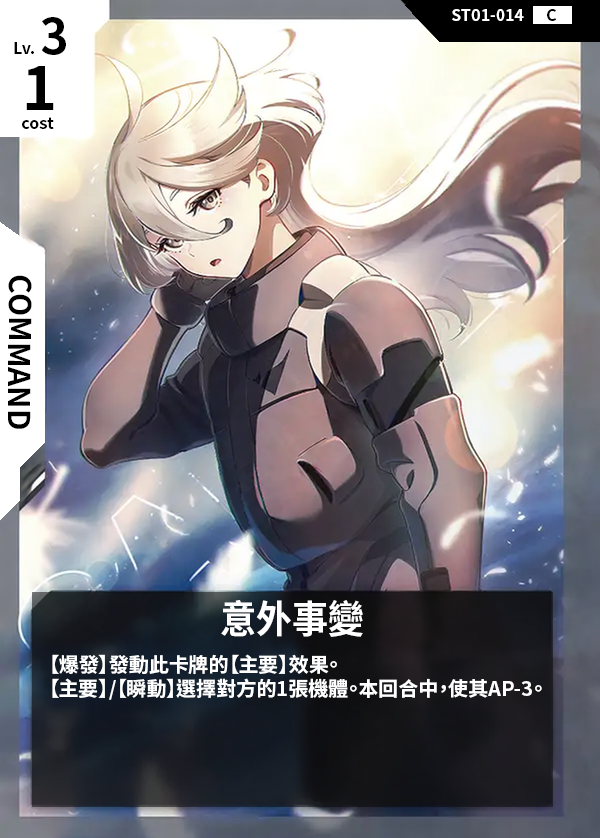
<style>
.page{position:relative;width:600px;height:838px}
.page>*{position:absolute;margin:0}
.t1{font:48px "NotoSansCJKtc-Bold";color:#000000}
.t2{font:16px "NotoSansCJKtc-Bold";color:#ffffff}
.t3{font:16px "NotoSansCJKtc-Bold";color:#000000}
.t4{font:60px "NotoSansCJKtc-Bold";color:#000000}
.t5{font:30px "NotoSansCJKtc-Bold";color:#000000}
.t6{font:38.4px "NotoSansCJKtc-Bold";color:#ffffff;scale:0.94 1}
.t7{font:20px "NotoSansCJKtc-Bold";color:#ffffff}
</style>
<div class="page">
<p class="t1" style="left:41px;top:17px;width:25px;height:38px">3</p>
<p class="t2" style="left:452px;top:9px;width:72px;height:12px">ST01-014</p>
<p class="t3" style="left:547px;top:9px;width:10px;height:12px">C</p>
<p class="t3" style="left:14px;top:42px;width:20px;height:12px">Lv.</p>
<p class="t4" style="left:26px;top:66px;width:28px;height:44px">1</p>
<p class="t3" style="left:22px;top:117px;width:32px;height:12px">cost</p>
<p class="t5" style="left:7px;top:275px;width:25px;height:154px;rotate:90deg">COMMAND</p>
<p class="t6" style="left:221px;top:600px;width:142px;height:37px">意外事變</p>
<p class="t7" style="left:52px;top:654px;width:490px;height:46px">【爆發】發動此卡牌的【主要】效果。<br>【主要】/【瞬動】選擇對方的1張機體。本回合中，使其AP-3。</p>
</div>
